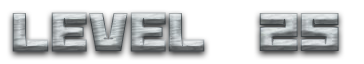
<style>
.page{position:relative;width:364px;height:64px;background:#ffffff}
.page>*{position:absolute;margin:0}
.t1{font:60px "BananaBrick"}
</style>
<div class="page">
<p class="t1" style="left:12px;top:12px;width:327px;height:40px">Level  25</p>
</div>
